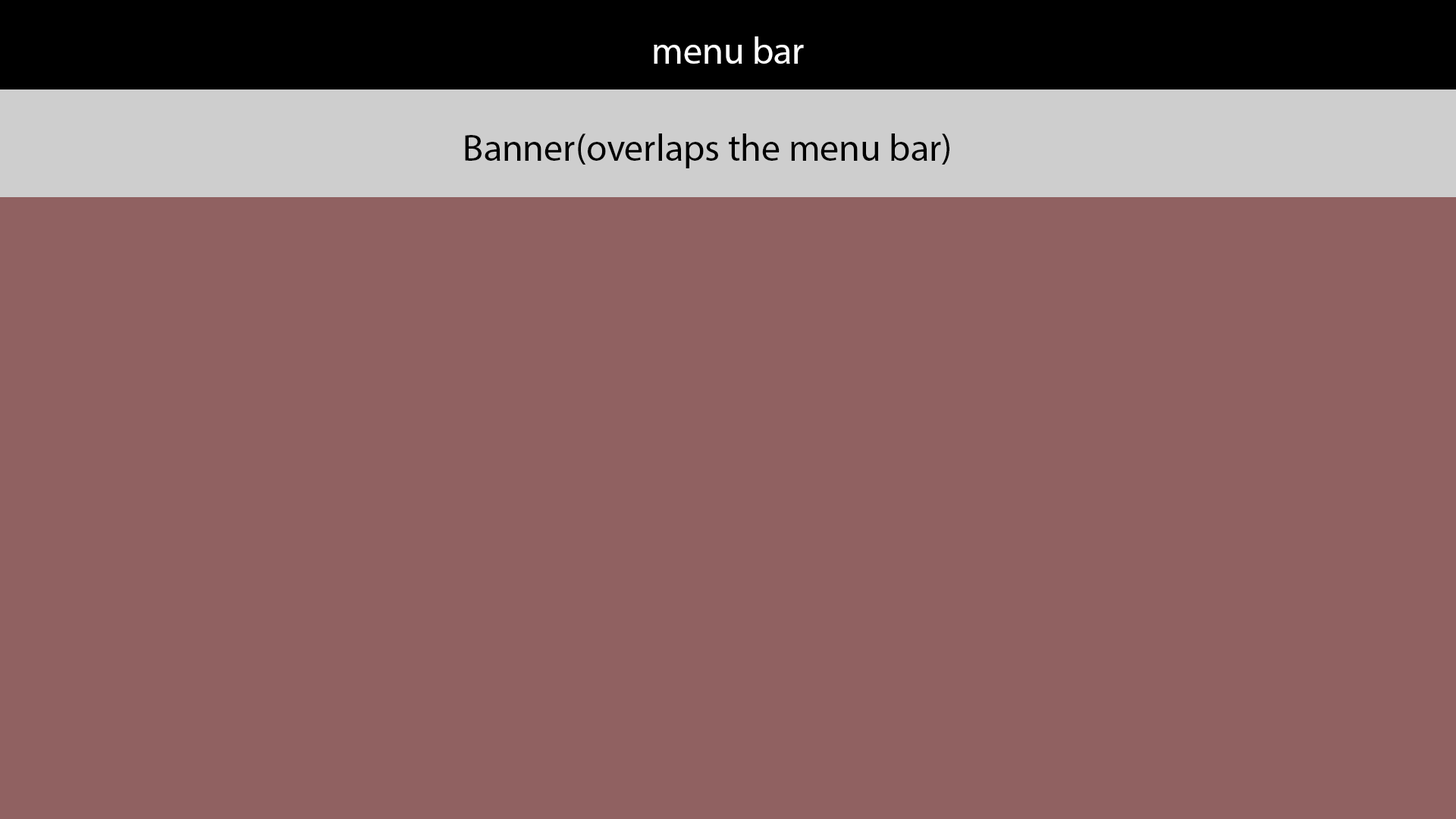
<style>
.page{position:relative;width:1456px;height:819px;background:#906161}
.page>*{position:absolute;margin:0}
.t1{font:9.1px "MyriadPro-Regular";color:#ffffff}
.t2{font:9.1px "MyriadPro-Regular";color:#000000}
</style>
<div class="page">
<p class="t1" style="left:654px;top:36px;width:150px;height:28px">menu bar</p>
<p class="t2" style="left:465px;top:133px;width:484px;height:35px">Banner(overlaps the menu bar)</p>
</div>
